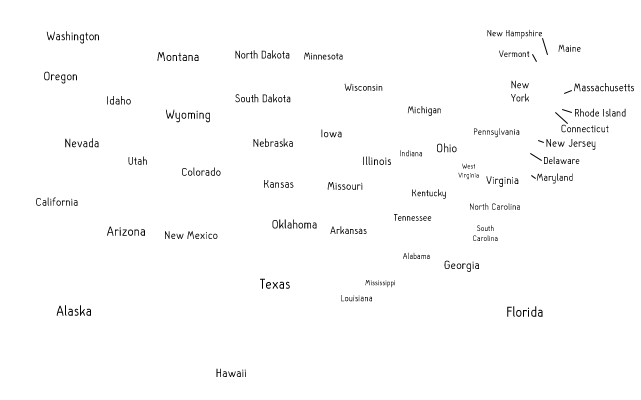
<style>
.page{position:relative;width:641px;height:400px;background:#ffffff}
.page>*{position:absolute;margin:0}
.t1{font:9.8px "HalloSans";letter-spacing:0.02em}
.t2{font:12.7px "HalloSans";letter-spacing:0.02em;color:#000000}
.t3{font:13.6px "HalloSans";letter-spacing:0.02em;color:#000000}
.t4{font:11.5px "HalloSans";letter-spacing:0.02em;color:#000000}
.t5{font:10.7px "HalloSans";letter-spacing:0.02em;color:#000000}
.t6{font:9.7px "HalloSans";letter-spacing:0.02em}
.t7{font:10.5px "HalloSans";letter-spacing:0.02em}
.t8{font:12.8px "HalloSans";letter-spacing:0.02em;color:#000000}
.t9{font:10.8px "HalloSans";letter-spacing:0.02em}
.t10{font:11.1px "HalloSans";letter-spacing:0.02em;color:#000000}
.t11{font:11.4px "HalloSans";letter-spacing:0.02em}
.t12{font:12.6px "HalloSans";letter-spacing:0.02em;color:#000000}
.t13{font:11.2px "HalloSans";letter-spacing:0.02em}
.t14{font:11px "HalloSans";letter-spacing:0.02em}
.t15{font:12.1px "HalloSans";letter-spacing:0.02em;color:#000000}
.t16{font:12px "HalloSans";letter-spacing:0.02em}
.t17{font:8.8px "HalloSans";letter-spacing:0.02em}
.t18{font:12.8px "HalloSans";letter-spacing:0.02em}
.t19{font:11.6px "HalloSans";letter-spacing:0.02em;color:#000000}
.t20{font:12.1px "HalloSans";letter-spacing:0.02em}
.t21{font:10.5px "HalloSans";letter-spacing:0.02em;color:#000000}
.t22{font:7.5px "HalloSans";letter-spacing:0.02em}
.t23{font:11.7px "HalloSans";letter-spacing:0.02em;color:#000000}
.t24{font:12px "HalloSans";letter-spacing:0.02em;color:#000000}
.t25{font:10.2px "HalloSans";letter-spacing:0.02em}
.t26{font:9.6px "HalloSans";letter-spacing:0.02em}
.t27{font:14px "HalloSans";letter-spacing:0.02em;color:#000000}
.t28{font:11.8px "HalloSans";letter-spacing:0.02em;color:#000000}
.t29{font:11.1px "HalloSans";letter-spacing:0.02em}
.t30{font:8.3px "HalloSans";letter-spacing:0.02em}
.t31{font:8.7px "HalloSans";letter-spacing:0.02em}
.t32{font:15px "HalloSans";letter-spacing:0.02em;color:#000000}
.t33{font:8px "HalloSans";letter-spacing:0.02em}
.t34{font:9.5px "HalloSans";letter-spacing:0.02em}
</style>
<div class="page">
<p class="t1" style="left:487px;top:29px;width:55px;height:10px">New Hampshire</p>
<p class="t2" style="left:46px;top:31px;width:53px;height:13px">Washington</p>
<p class="t3" style="left:157px;top:52px;width:42px;height:9px">Montana</p>
<p class="t4" style="left:235px;top:50px;width:55px;height:9px">North Dakota</p>
<p class="t5" style="left:304px;top:52px;width:39px;height:8px">Minnesota</p>
<p class="t6" style="left:499px;top:50px;width:31px;height:7px">Vermont</p>
<p class="t7" style="left:558px;top:44px;width:23px;height:8px">Maine</p>
<p class="t8" style="left:44px;top:71px;width:33px;height:13px">Oregon</p>
<p class="t9" style="left:344px;top:83px;width:39px;height:8px">Wisconsin</p>
<p class="t10" style="left:511px;top:80px;width:18px;height:22px;text-align:center">New <br>York</p>
<p class="t11" style="left:574px;top:83px;width:60px;height:9px">Massachusetts</p>
<p class="t12" style="left:107px;top:96px;width:24px;height:9px">Idaho</p>
<p class="t4" style="left:235px;top:94px;width:56px;height:9px">South Dakota</p>
<p class="t3" style="left:165px;top:109px;width:45px;height:14px">Wyoming</p>
<p class="t7" style="left:407px;top:106px;width:34px;height:10px">Michigan</p>
<p class="t13" style="left:575px;top:108px;width:51px;height:9px">Rhode Island</p>
<p class="t14" style="left:561px;top:124px;width:48px;height:9px">Connecticut</p>
<p class="t15" style="left:321px;top:129px;width:21px;height:9px">Iowa</p>
<p class="t1" style="left:474px;top:128px;width:46px;height:10px">Pennsylvania</p>
<p class="t2" style="left:65px;top:138px;width:34px;height:10px">Nevada</p>
<p class="t16" style="left:253px;top:138px;width:40px;height:9px">Nebraska</p>
<p class="t17" style="left:400px;top:150px;width:22px;height:7px">Indiana</p>
<p class="t18" style="left:437px;top:143px;width:20px;height:10px">Ohio</p>
<p class="t19" style="left:546px;top:139px;width:50px;height:11px">New Jersey</p>
<p class="t20" style="left:128px;top:156px;width:19px;height:9px">Utah</p>
<p class="t12" style="left:363px;top:156px;width:28px;height:9px">Illinois</p>
<p class="t21" style="left:544px;top:156px;width:36px;height:8px">Delaware</p>
<p class="t16" style="left:182px;top:167px;width:39px;height:9px">Colorado</p>
<p class="t22" style="left:458px;top:163px;width:21px;height:17px;text-align:center">West <br>Virginia</p>
<p class="t9" style="left:536px;top:173px;width:37px;height:11px">Maryland</p>
<p class="t20" style="left:264px;top:180px;width:30px;height:8px">Kansas</p>
<p class="t16" style="left:327px;top:182px;width:36px;height:8px">Missouri</p>
<p class="t23" style="left:486px;top:176px;width:33px;height:11px">Virginia</p>
<p class="t24" style="left:36px;top:197px;width:42px;height:9px">California</p>
<p class="t25" style="left:412px;top:189px;width:34px;height:10px">Kentucky</p>
<p class="t26" style="left:470px;top:203px;width:50px;height:7px">North Carolina</p>
<p class="t8" style="left:272px;top:219px;width:45px;height:10px">Oklahoma</p>
<p class="t25" style="left:394px;top:214px;width:38px;height:7px">Tennessee</p>
<p class="t27" style="left:107px;top:226px;width:38px;height:10px">Arizona</p>
<p class="t28" style="left:165px;top:231px;width:53px;height:8px">New Mexico</p>
<p class="t29" style="left:330px;top:226px;width:37px;height:8px">Arkansas</p>
<p class="t30" style="left:473px;top:225px;width:25px;height:16px;text-align:center">South <br>Carolina</p>
<p class="t31" style="left:403px;top:252px;width:27px;height:7px">Alabama</p>
<p class="t12" style="left:444px;top:260px;width:35px;height:12px">Georgia</p>
<p class="t32" style="left:260px;top:278px;width:30px;height:11px">Texas</p>
<p class="t33" style="left:365px;top:280px;width:30px;height:8px">Mississippi</p>
<p class="t32" style="left:56px;top:305px;width:35px;height:11px">Alaska</p>
<p class="t34" style="left:341px;top:295px;width:31px;height:7px">Louisiana</p>
<p class="t32" style="left:507px;top:306px;width:36px;height:11px">Florida</p>
<p class="t12" style="left:216px;top:368px;width:30px;height:9px">Hawaii</p>
</div>
